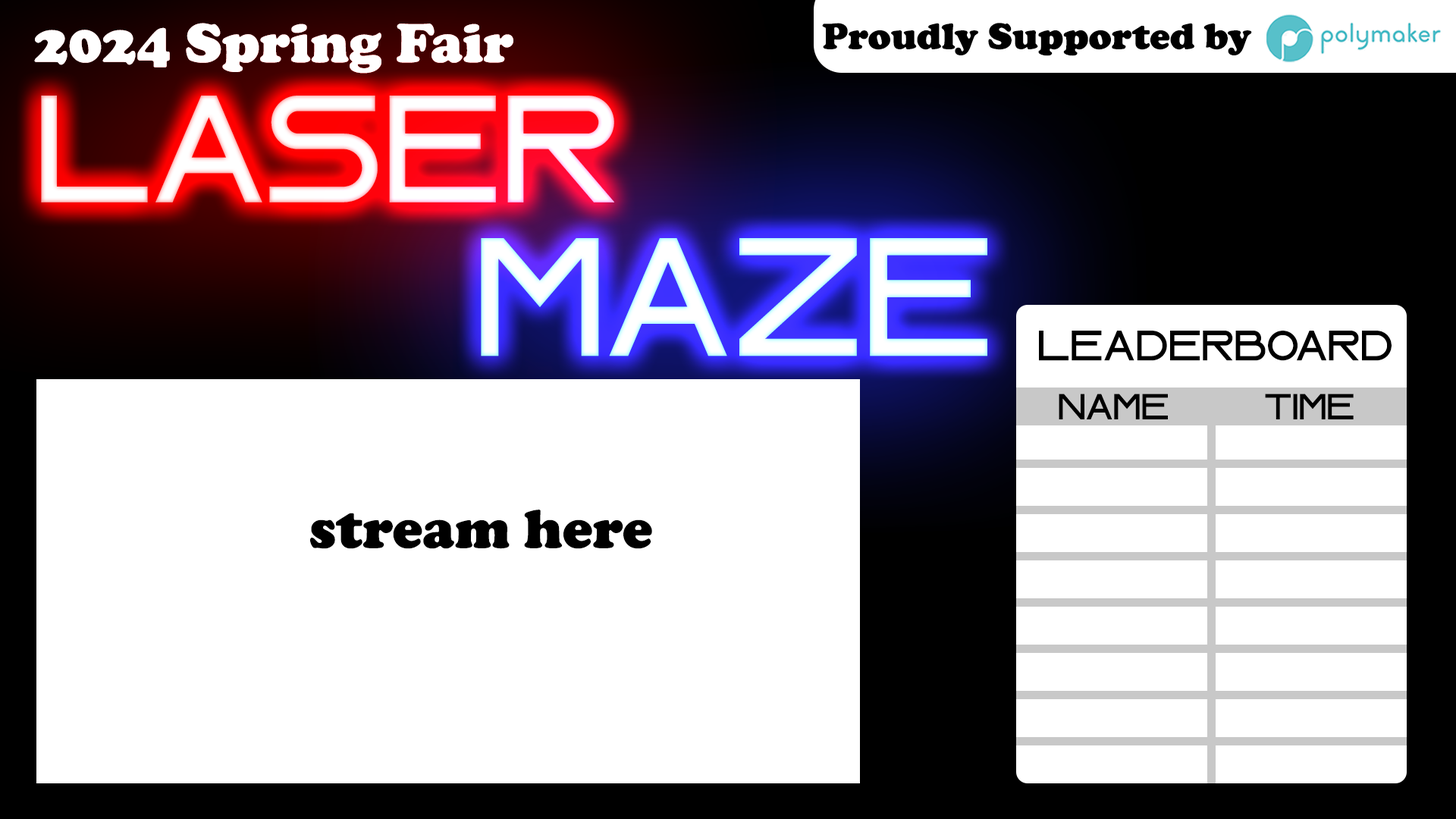
<style>
.page{position:relative;width:1456px;height:819px;background:#ffffff}
.page>*{position:absolute;margin:0}
.t1{font:56.9px "CooperBlack";color:#ffffff}
.t2{font:38px "CooperBlack";color:#000000}
.t3{font:153.2px "LASER";color:#ffffff}
.t4{font:169.2px "LASER";color:#ffffff}
.t5{font:42.5px "LASER";color:#000000}
.t6{font:36.4px "LASER";color:#000000}
.t7{font:56.9px "CooperBlack";color:#000000}
</style>
<div class="page">
<p class="t1" style="left:34px;top:23px;width:479px;height:51px">2024 Spring Fair</p>
<p class="t2" style="left:822px;top:23px;width:430px;height:33px">Proudly Supported by</p>
<p class="t3" style="left:41px;top:96px;width:573px;height:106px">Laser</p>
<p class="t3" style="left:41px;top:96px;width:573px;height:106px">Laser</p>
<p class="t4" style="left:481px;top:238px;width:506px;height:118px">Maze</p>
<p class="t4" style="left:481px;top:238px;width:506px;height:118px">Maze</p>
<p class="t5" style="left:1039px;top:331px;width:353px;height:30px">Leaderboard</p>
<p class="t6" style="left:1059px;top:394px;width:109px;height:25px">Name</p>
<p class="t6" style="left:1265px;top:394px;width:89px;height:25px">Time</p>
<p class="t7" style="left:310px;top:510px;width:342px;height:39px">stream here</p>
</div>
